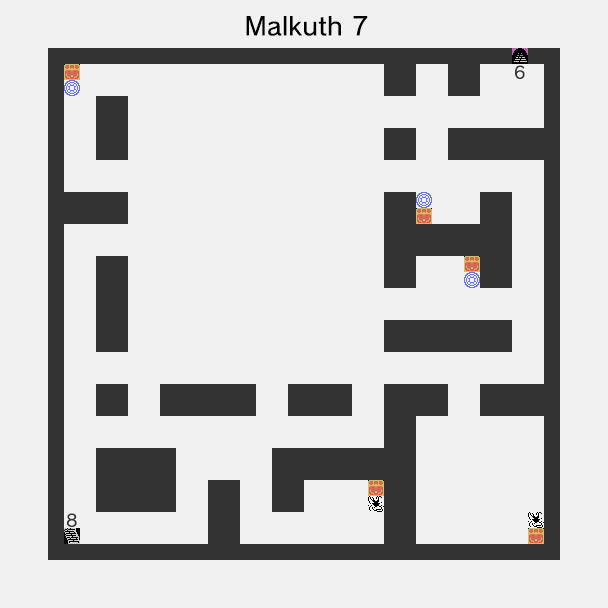
<style>
.page{position:relative;width:608px;height:608px;background:#f1f1f1}
.page>*{position:absolute;margin:0}
.t1{font:25px "nintendoNTLG-DB002";color:#000000}
.t2{font:16.7px "nintendoNTLG-DB002";color:#333333}
</style>
<div class="page">
<p class="t1" style="left:246px;top:16px;width:122px;height:20px">Malkuth 7</p>
<p class="t2" style="left:515px;top:65px;width:10px;height:14px">6</p>
<p class="t2" style="left:66px;top:513px;width:11px;height:14px">8</p>
</div>
